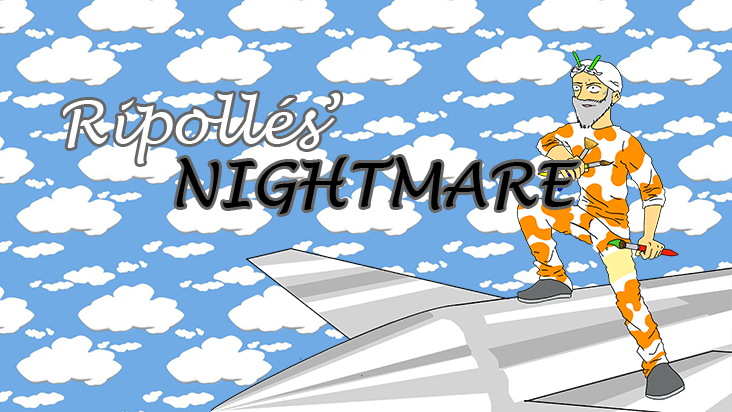
<style>
.page{position:relative;width:732px;height:412px;background:#ffffff}
.page>*{position:absolute;margin:0}
.t1{font:60px "LucidaHandwriting-Italic";color:#ffffff}
.t2{font:60px "LucidaHandwriting-Italic";color:#000000}
</style>
<div class="page">
<p class="t1" style="left:63px;top:93px;width:278px;height:71px">Ripollés’</p>
<p class="t2" style="left:176px;top:157px;width:403px;height:57px">NIGHTMARE</p>
</div>
